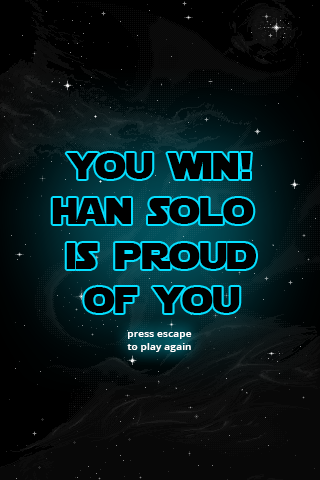
<style>
.page{position:relative;width:320px;height:480px;background:#000000}
.page>*{position:absolute;margin:0}
.t1{font:37.2px "StarJedi";color:#000000}
.t2{font:10.4px "OpenSans-Semibold";color:#ffffff}
</style>
<div class="page">
<p class="t1" style="left:52px;top:153px;width:204px;height:160px;text-align:center">you win!<br>han solo <br>is proud<br>of you</p>
<p class="t2" style="left:127px;top:332px;width:65px;height:20px;text-align:center">press escape<br>to play again</p>
</div>
